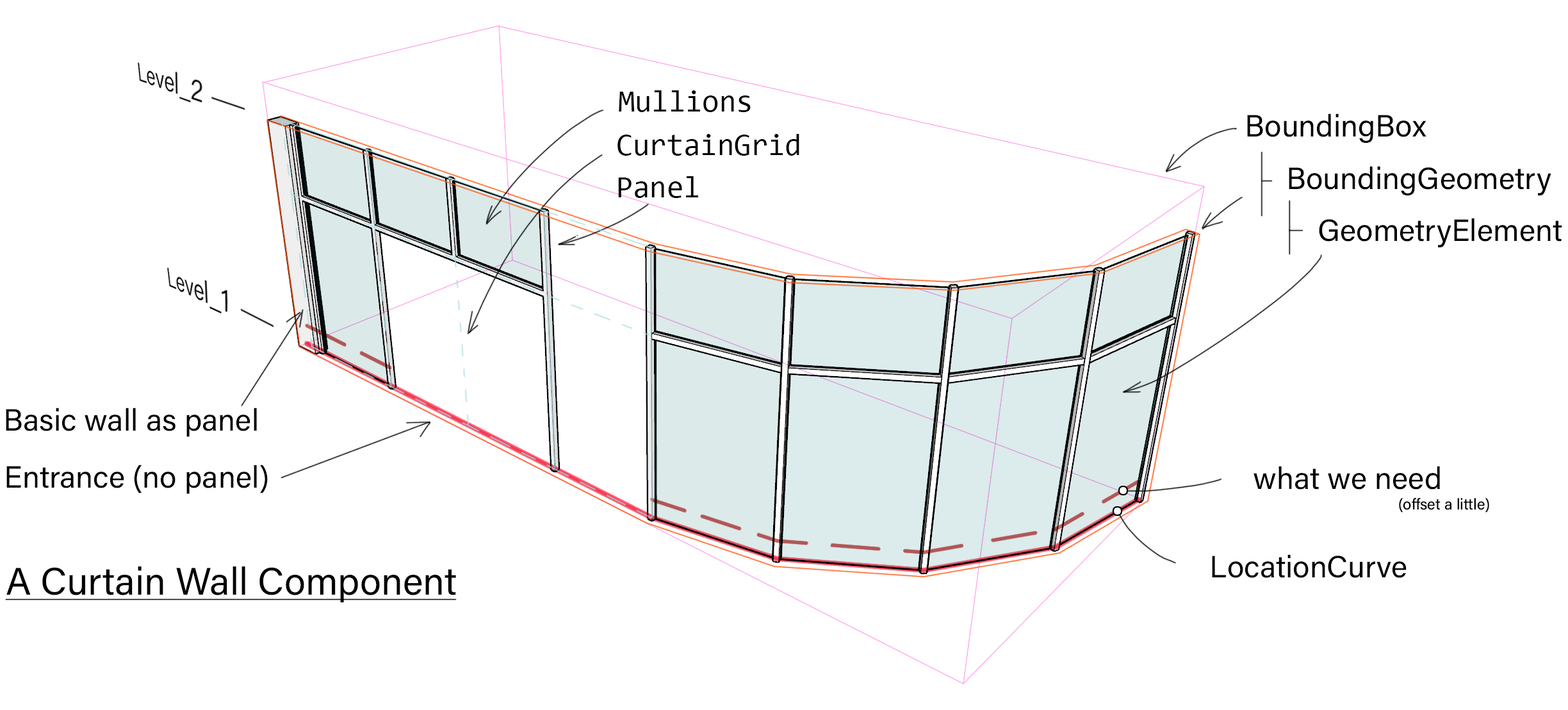
<style>
.page{position:relative;width:1568px;height:710px;background:#ffffff}
.page>*{position:absolute;margin:0}
.t1{font:30.7px "Consolas";color:#000000}
.t2{font:30.7px "AcuminConcept-Regular";color:#000000}
.t3{font:15.4px "AcuminConcept-Regular";color:#000000}
.t4{font:38.4px "AcuminConcept-Regular";color:#000000}
</style>
<div class="page">
<p class="t1" style="left:619px;top:90px;width:132px;height:22px">Mullions</p>
<p class="t2" style="left:1247px;top:113px;width:179px;height:30px">BoundingBox</p>
<p class="t1" style="left:617px;top:134px;width:182px;height:22px">CurtainGrid</p>
<p class="t2" style="left:1289px;top:166px;width:262px;height:29px">BoundingGeometry</p>
<p class="t1" style="left:618px;top:176px;width:80px;height:22px">Panel</p>
<p class="t2" style="left:1319px;top:218px;width:243px;height:29px">GeometryElement</p>
<p class="t2" style="left:6px;top:407px;width:251px;height:30px">Basic wall as panel</p>
<p class="t2" style="left:6px;top:464px;width:262px;height:30px">Entrance (no panel)</p>
<p class="t2" style="left:1254px;top:466px;width:186px;height:23px">what we need</p>
<p class="t3" style="left:1399px;top:498px;width:90px;height:14px">(offset a little)</p>
<p class="t2" style="left:1212px;top:554px;width:195px;height:24px">LocationCurve</p>
<p class="t4" style="left:6px;top:566px;width:450px;height:36px">A Curtain Wall Component</p>
</div>
